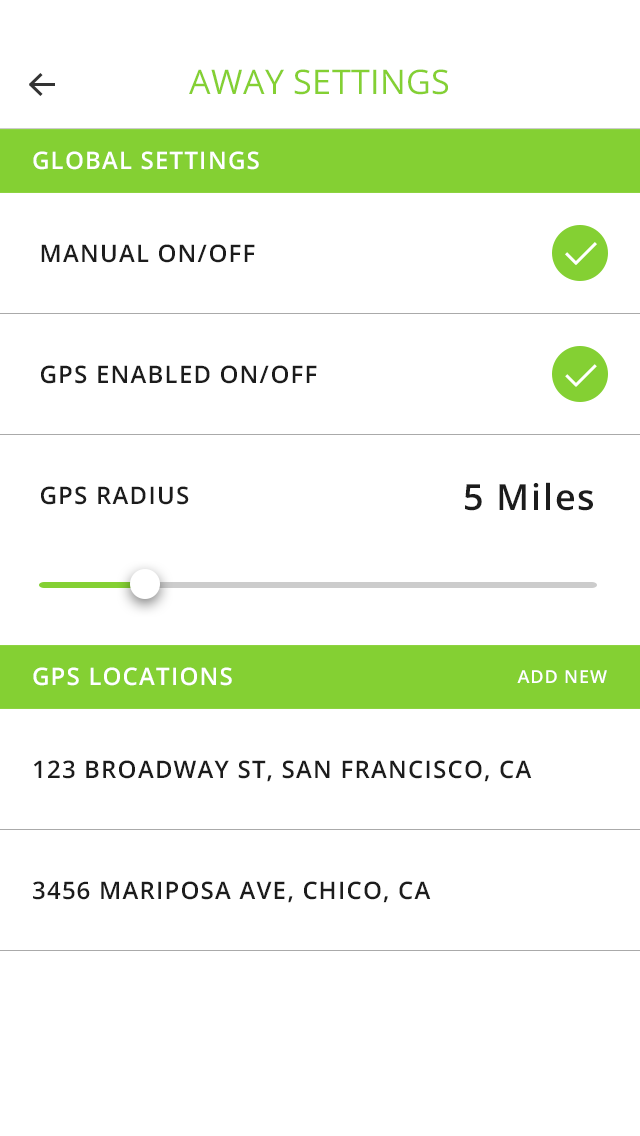
<style>
.page{position:relative;width:640px;height:1136px;background:#ffffff}
.page>*{position:absolute;margin:0}
.t1{font:34px "OpenSans";letter-spacing:0.01em;color:#84d033;text-transform:uppercase}
.t2{font:24px "OpenSans-Semibold";letter-spacing:0.05em;color:#ffffff;text-transform:uppercase}
.t3{font:24px "OpenSans-Semibold";letter-spacing:0.05em;color:#1c1c1c;text-transform:uppercase}
.t4{font:36px "OpenSans-Semibold";letter-spacing:0.05em;color:#1c1c1c}
.t5{font:36px "OpenSans-Semibold";letter-spacing:0.05em;color:#1c1c1c;text-transform:uppercase}
.t6{font:18px "OpenSans-Semibold";letter-spacing:0.05em;color:#ffffff;text-transform:uppercase}
</style>
<div class="page">
<p class="t1" style="left:189px;top:69px;width:259px;height:26px">AWAY SETTINGS</p>
<p class="t2" style="left:33px;top:151px;width:226px;height:19px">GLOBAL SETTINGS</p>
<p class="t3" style="left:41px;top:244px;width:214px;height:19px">MANUAL ON/OFF</p>
<p class="t3" style="left:41px;top:365px;width:276px;height:19px">GPS ENABLED ON/OFF</p>
<p class="t3" style="left:41px;top:486px;width:148px;height:19px">GPS RADIUS</p>
<p class="t4" style="left:465px;top:482px;width:128px;height:29px"><span class="t5">5 </span>Miles</p>
<p class="t2" style="left:33px;top:667px;width:199px;height:19px">GPS LOCATIONS</p>
<p class="t6" style="left:517px;top:670px;width:90px;height:13px">ADD NEW</p>
<p class="t3" style="left:34px;top:760px;width:498px;height:22px">123 BROADWAY ST, San francisco, CA</p>
<p class="t3" style="left:33px;top:881px;width:398px;height:22px">3456 MARIPOSA AVE, CHICO, CA</p>
</div>
